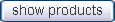
<style>
.page{position:relative;width:115px;height:22px}
.page>*{position:absolute;margin:0}
.t1{font:12.6px "ArialMT";color:#3d3d3d;scale:1.1 1}
</style>
<div class="page">
<p class="t1" style="left:13px;top:5px;width:89px;height:13px">show products</p>
</div>
